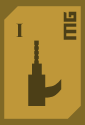
<style>
.page{position:relative;width:85px;height:125px;background:#bf9739}
.page>*{position:absolute;margin:0}
.t1{font:20px "TransformersMovie";letter-spacing:0.04em;color:#4c3f17}
.t2{font:20px "TimesNewRomanPS-BoldMT";letter-spacing:-0.04em;color:#4c3f17}
</style>
<div class="page">
<p class="t1" style="left:63px;top:11px;width:14px;height:29px;rotate:-90deg">mg</p>
<p class="t2" style="left:16px;top:23px;width:7px;height:14px">I</p>
</div>
